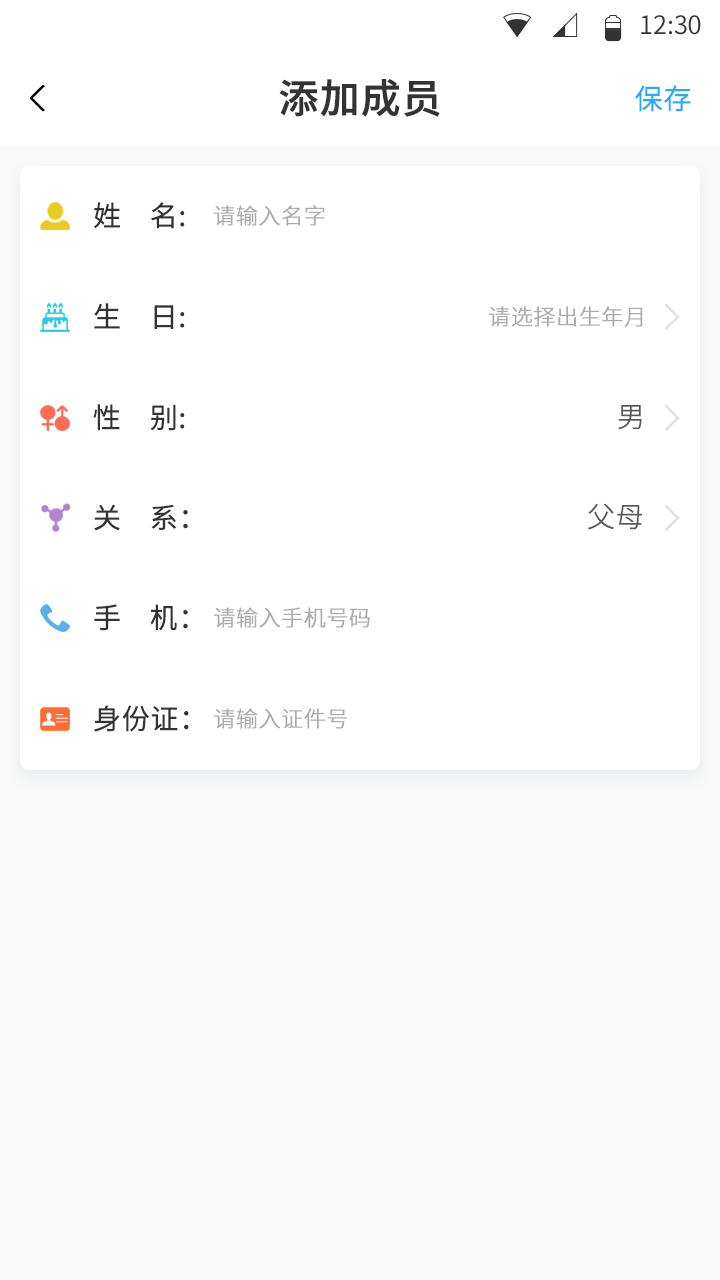
<style>
.page{position:relative;width:720px;height:1280px;background:#ffffff}
.page>*{position:absolute;margin:0}
.t1{font:25.4px "SourceHanSansCN-Normal";color:#333333}
.t2{font:40px "SourceHanSansCN-Medium";color:#333333;font-weight:bold}
.t3{font:28px "SourceHanSansCN-Normal";color:#24aaff;font-weight:bold}
.t4{font:28px "SourceHanSansCN-Normal";color:#333333;font-weight:bold}
.t5{font:22px "SourceHanSansCN-Light";color:#ababab;font-weight:bold}
.t6{font:28px "SourceHanSansCN-Light";color:#575757;font-weight:bold}
</style>
<div class="page">
<p class="t1" style="left:641px;top:15px;width:60px;height:20px">12:30</p>
<p class="t2" style="left:279px;top:79px;width:161px;height:38px">添加成员</p>
<p class="t3" style="left:635px;top:85px;width:56px;height:27px">保存</p>
<p class="t4" style="left:94px;top:202px;width:91px;height:27px">姓    名:</p>
<p class="t5" style="left:213px;top:205px;width:112px;height:21px">请输入名字</p>
<p class="t4" style="left:94px;top:303px;width:91px;height:26px">生    日:</p>
<p class="t5" style="left:488px;top:306px;width:155px;height:21px">请选择出生年月</p>
<p class="t4" style="left:93px;top:404px;width:92px;height:27px">性    别:</p>
<p class="t6" style="left:618px;top:405px;width:24px;height:25px">男</p>
<p class="t4" style="left:94px;top:504px;width:94px;height:27px">关    系：</p>
<p class="t6" style="left:588px;top:503px;width:54px;height:27px">父母</p>
<p class="t4" style="left:94px;top:604px;width:94px;height:27px">手    机：</p>
<p class="t5" style="left:214px;top:607px;width:156px;height:21px">请输入手机号码</p>
<p class="t4" style="left:94px;top:705px;width:95px;height:27px">身份证：</p>
<p class="t5" style="left:214px;top:708px;width:134px;height:21px">请输入证件号</p>
</div>
